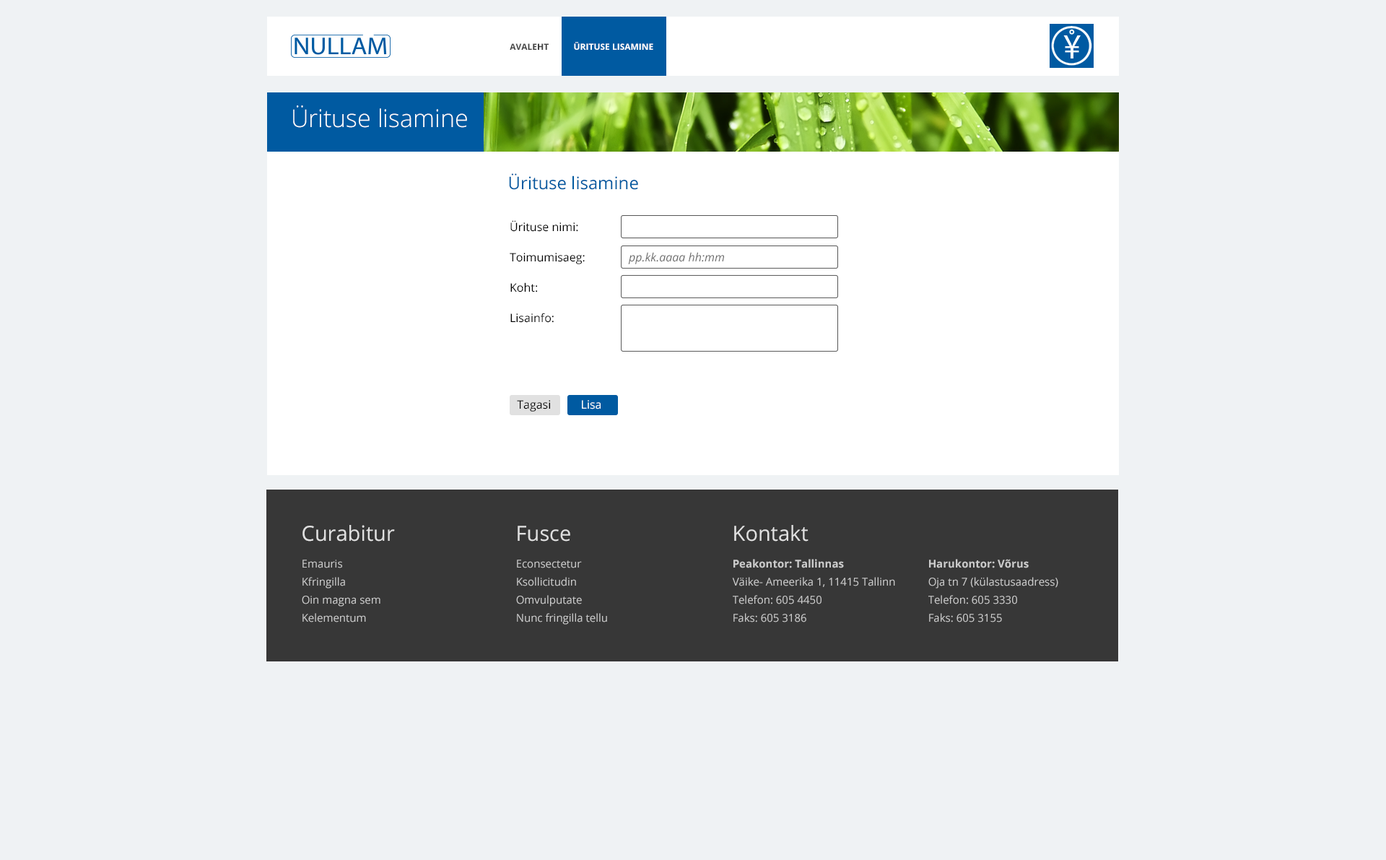
<style>
.page{position:relative;width:1386px;height:860px;background:#eff2f4}
.page>*{position:absolute;margin:0}
.t1{font:24.6px "OpenSans-Light";color:#ffffff}
.t2{font:17.3px "OpenSans";color:#005aa1}
.t3{font:11.5px/30.3px "OpenSans";color:#000000}
.t4{font:11.5px "OpenSans-Italic";color:#6c6c6c}
.t5{font:11.6px "OpenSans";color:#000000}
.t6{font:11.6px "OpenSans";color:#ffffff}
.t7{font:20.9px "OpenSans";color:#e0e0e0}
.t8{font:10.8px/18.1px "OpenSans";color:#cbcbcb}
.t9{font:10.8px/18.1px "OpenSans-Bold";color:#cbcbcb}
</style>
<div class="page">
<p class="t1" style="left:293px;top:105px;width:174px;height:23px">Ürituse lisamine</p>
<p class="t2" style="left:509px;top:173px;width:129px;height:17px">Ürituse lisamine</p>
<p class="t3" style="left:510px;top:220px;width:75px;height:103px">Ürituse nimi:<br>Toimumisaeg:<br>Koht:<br>Lisainfo:</p>
<p class="t4" style="left:628px;top:252px;width:96px;height:12px">pp.kk.aaaa hh:mm</p>
<p class="t5" style="left:517px;top:400px;width:33px;height:12px">Tagasi</p>
<p class="t6" style="left:582px;top:400px;width:19px;height:9px">Lisa</p>
<p class="t7" style="left:303px;top:525px;width:92px;height:17px">Curabitur</p>
<p class="t7" style="left:518px;top:526px;width:52px;height:16px">Fusce</p>
<p class="t7" style="left:734px;top:525px;width:75px;height:17px">Kontakt</p>
<p class="t8" style="left:302px;top:560px;width:79px;height:62px">Emauris<br>Kfringilla<br>Oin magna sem<br>Kelementum</p>
<p class="t8" style="left:516px;top:560px;width:91px;height:65px">Econsectetur <br>Ksollicitudin <br>Omvulputate <br>Nunc fringilla tellu</p>
<p class="t8" style="left:732px;top:559px;width:163px;height:63px"><span class="t9">Peakontor: Tallinnas<br></span>Väike- Ameerika 1, 11415 Tallinn<br>Telefon: 605 4450<br>Faks: 605 3186</p>
<p class="t8" style="left:929px;top:559px;width:130px;height:63px"><span class="t9">Harukontor: Võrus<br></span>Oja tn 7 (külastusaadress)<br>Telefon: 605 3330<br>Faks: 605 3155</p>
</div>
